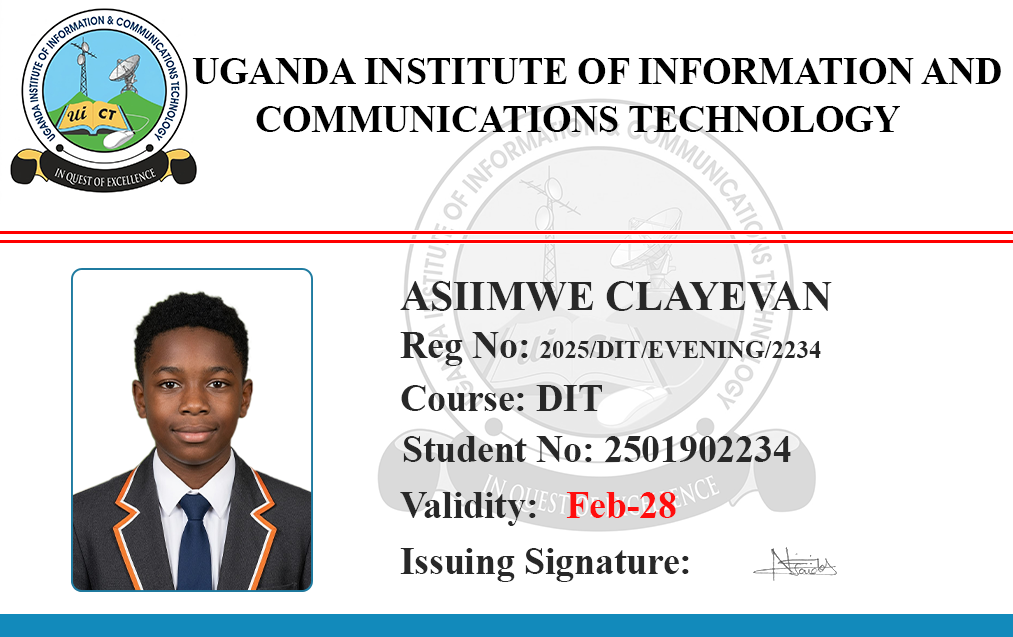
<style>
.page{position:relative;width:1013px;height:637px;background:#ffffff}
.page>*{position:absolute;margin:0}
.t1{font:37.5px "TimesNewRomanPS-BoldMT";color:#000000}
.t2{font:41.7px "TimesNewRomanPS-BoldMT";color:#282828}
.t3{font:25px "TimesNewRomanPS-BoldMT";color:#282828}
.t4{font:37.5px "TimesNewRomanPS-BoldMT";color:#282828}
.t5{font:37.5px "TimesNewRomanPS-BoldMT";color:#ff0d0d}
</style>
<div class="page">
<p class="t1" style="left:192px;top:58px;width:809px;height:26px">UGANDA INSTITUTE OF INFORMATION AND</p>
<p class="t1" style="left:256px;top:106px;width:644px;height:26px">COMMUNICATIONS TECHNOLOGY</p>
<p class="t2" style="left:400px;top:281px;width:432px;height:30px">ASIIMWE CLAYEVAN</p>
<p class="t3" style="left:400px;top:332px;width:421px;height:34px"><span class="t4">Reg No: </span>2025/DIT/EVENING/2234</p>
<p class="t4" style="left:401px;top:385px;width:201px;height:26px">Course: DIT</p>
<p class="t4" style="left:403px;top:436px;width:388px;height:26px">Student No: 2501902234</p>
<p class="t4" style="left:400px;top:492px;width:276px;height:34px">Validity:   <span class="t5">Feb-28</span></p>
<p class="t4" style="left:400px;top:548px;width:289px;height:34px">Issuing Signature:</p>
</div>
